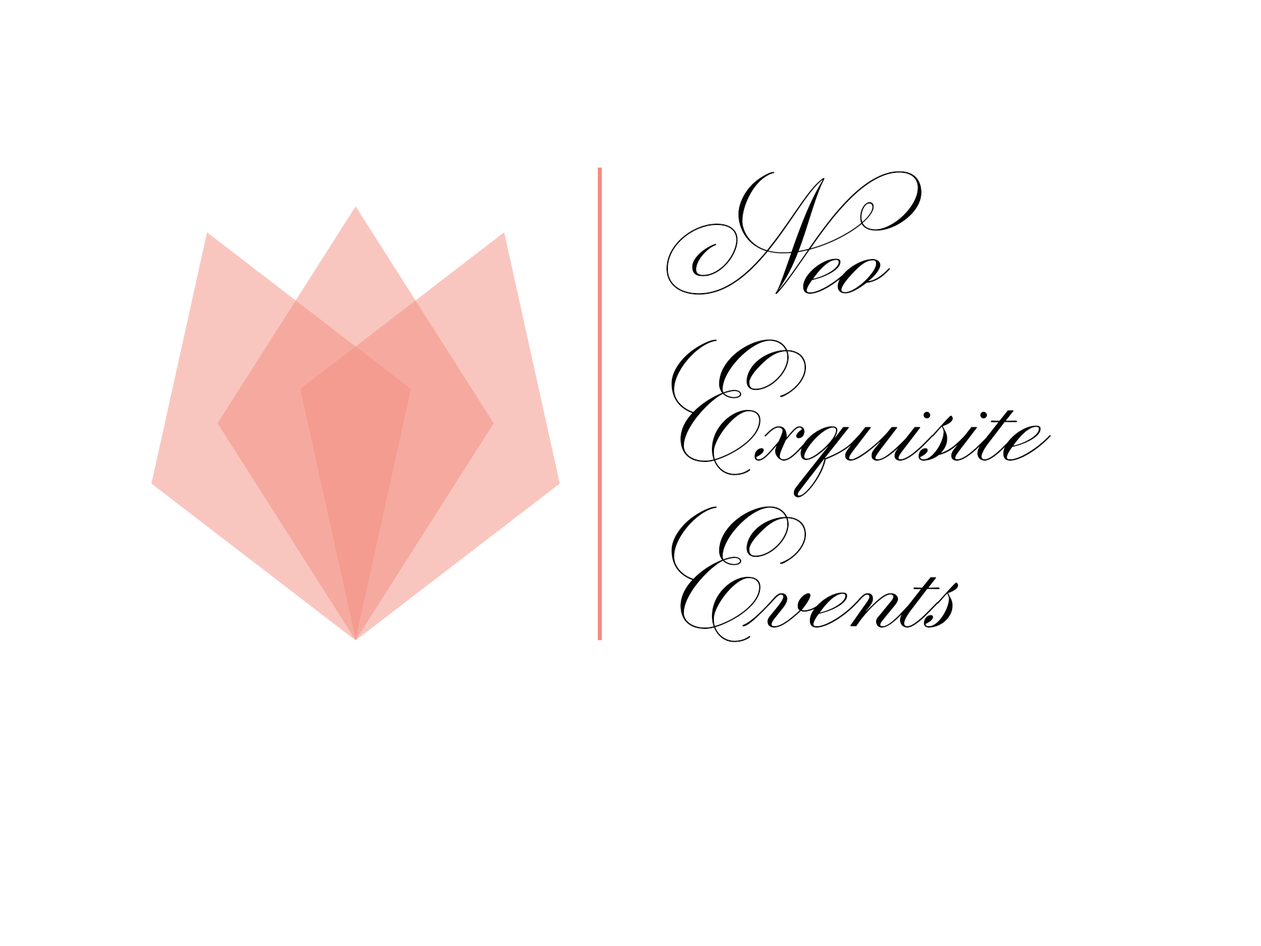
<style>
.page{position:relative;width:1261px;height:946px;background:#ffffff}
.page>*{position:absolute;margin:0}
.t1{font:166.8px/166.8px "SweetFancyScript-Light";color:#000000}
</style>
<div class="page">
<p class="t1" style="left:667px;top:171px;width:384px;height:471px">Neo<br>Exquisite<br>Events</p>
</div>
